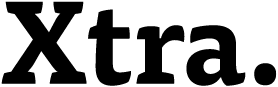
<style>
.page{position:relative;width:278px;height:87px;background:#ffffff}
.page>*{position:absolute;margin:0}
.t1{font:115.4px "TisaPro-Bold";color:#000000}
</style>
<div class="page">
<p class="t1" style="left:1px;top:1px;width:276px;height:85px">Xtra.</p>
</div>
